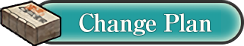
<style>
.page{position:relative;width:244px;height:46px}
.page>*{position:absolute;margin:0}
.t1{font:24px "RyuminPro-ExBold";letter-spacing:-0.04em;color:#fffffa}
</style>
<div class="page">
<p class="t1" style="left:79px;top:13px;width:133px;height:23px">Change Plan</p>
</div>
